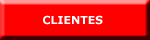
<style>
.page{position:relative;width:150px;height:40px;background:#ff0000}
.page>*{position:absolute;margin:0}
.t1{font:11px "Verdana-Bold";color:#ffffff}
.t2{font:12px "Verdana-Bold";color:#ffffff}
</style>
<div class="page">
<p class="t1" style="left:43px;top:15px;width:60px;height:10px"><span class="t2">     </span>CLIENTES</p>
</div>
